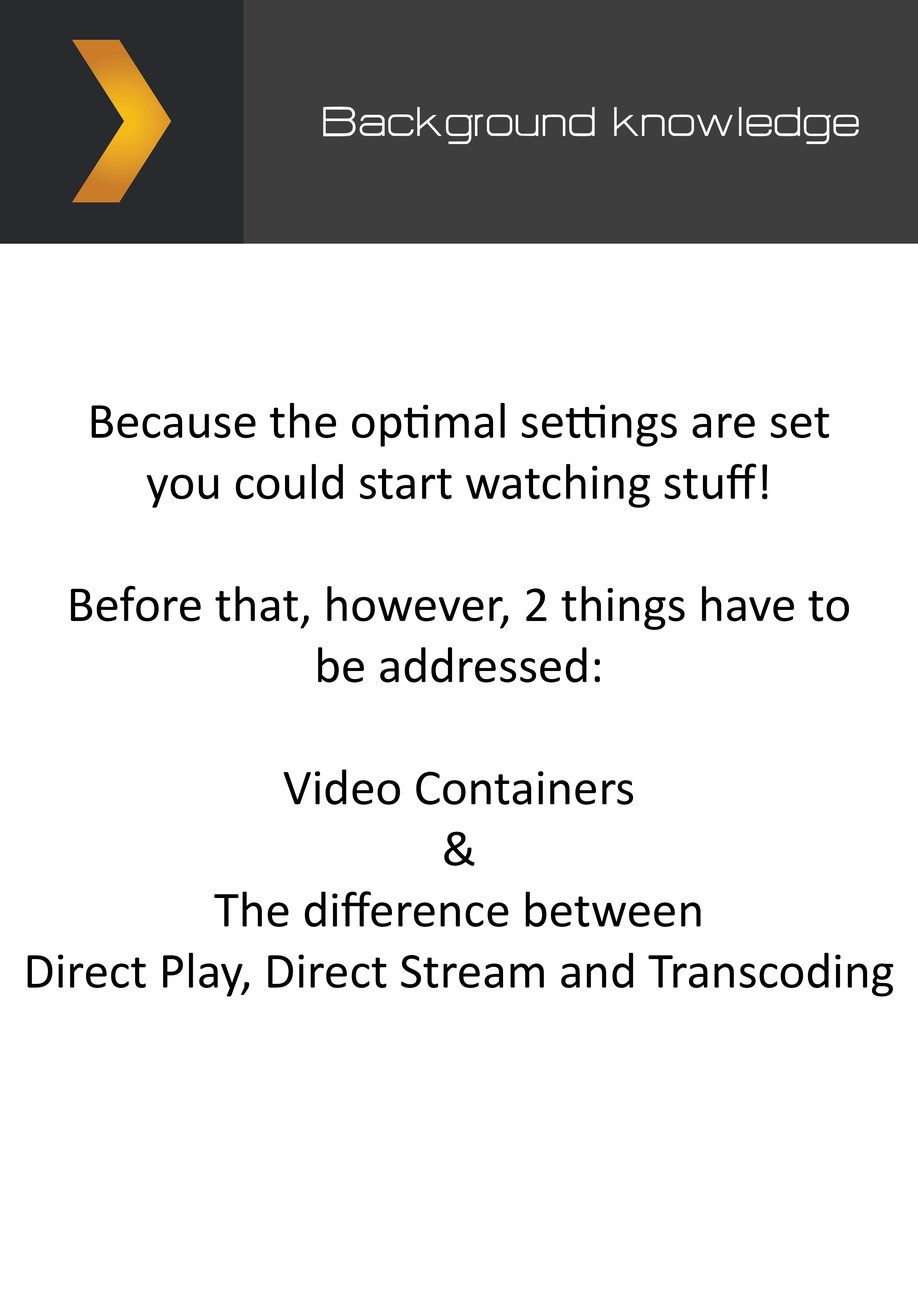
<style>
.page{position:relative;width:918px;height:1299px;background:#ffffff}
.page>*{position:absolute;margin:0}
.t1{font:50.9px "HURTMOLDPersonalUse-Regular";color:#ffffff}
.t2{font:50.9px "Calibri";color:#000000}
</style>
<div class="page">
<p class="t1" style="left:323px;top:107px;width:536px;height:37px">Background knowledge</p>
<p class="t2" style="left:27px;top:403px;width:866px;height:593px;text-align:center">Because the optimal settings are set<br>you could start watching stuff!<br><br>Before that, however, 2 things have to<br>be addressed:<br><br>Video Containers<br>&amp;<br>The difference between<br>Direct Play, Direct Stream and Transcoding</p>
</div>
